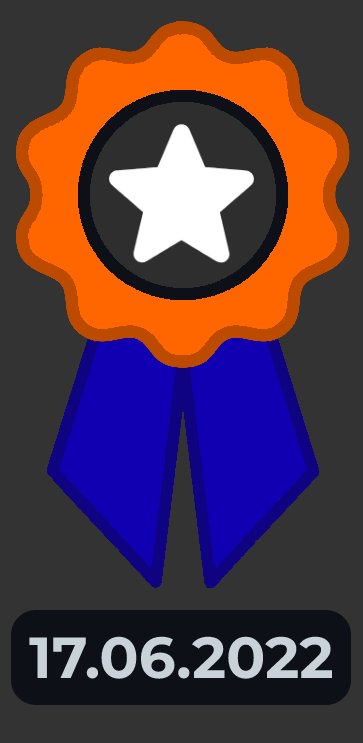
<style>
.page{position:relative;width:363px;height:743px;background:#333333}
.page>*{position:absolute;margin:0}
.t1{font:58px "Montserrat-Bold";color:#c9d1d9}
</style>
<div class="page">
<p class="t1" style="left:29px;top:636px;width:303px;height:43px">17.06.2022</p>
</div>
